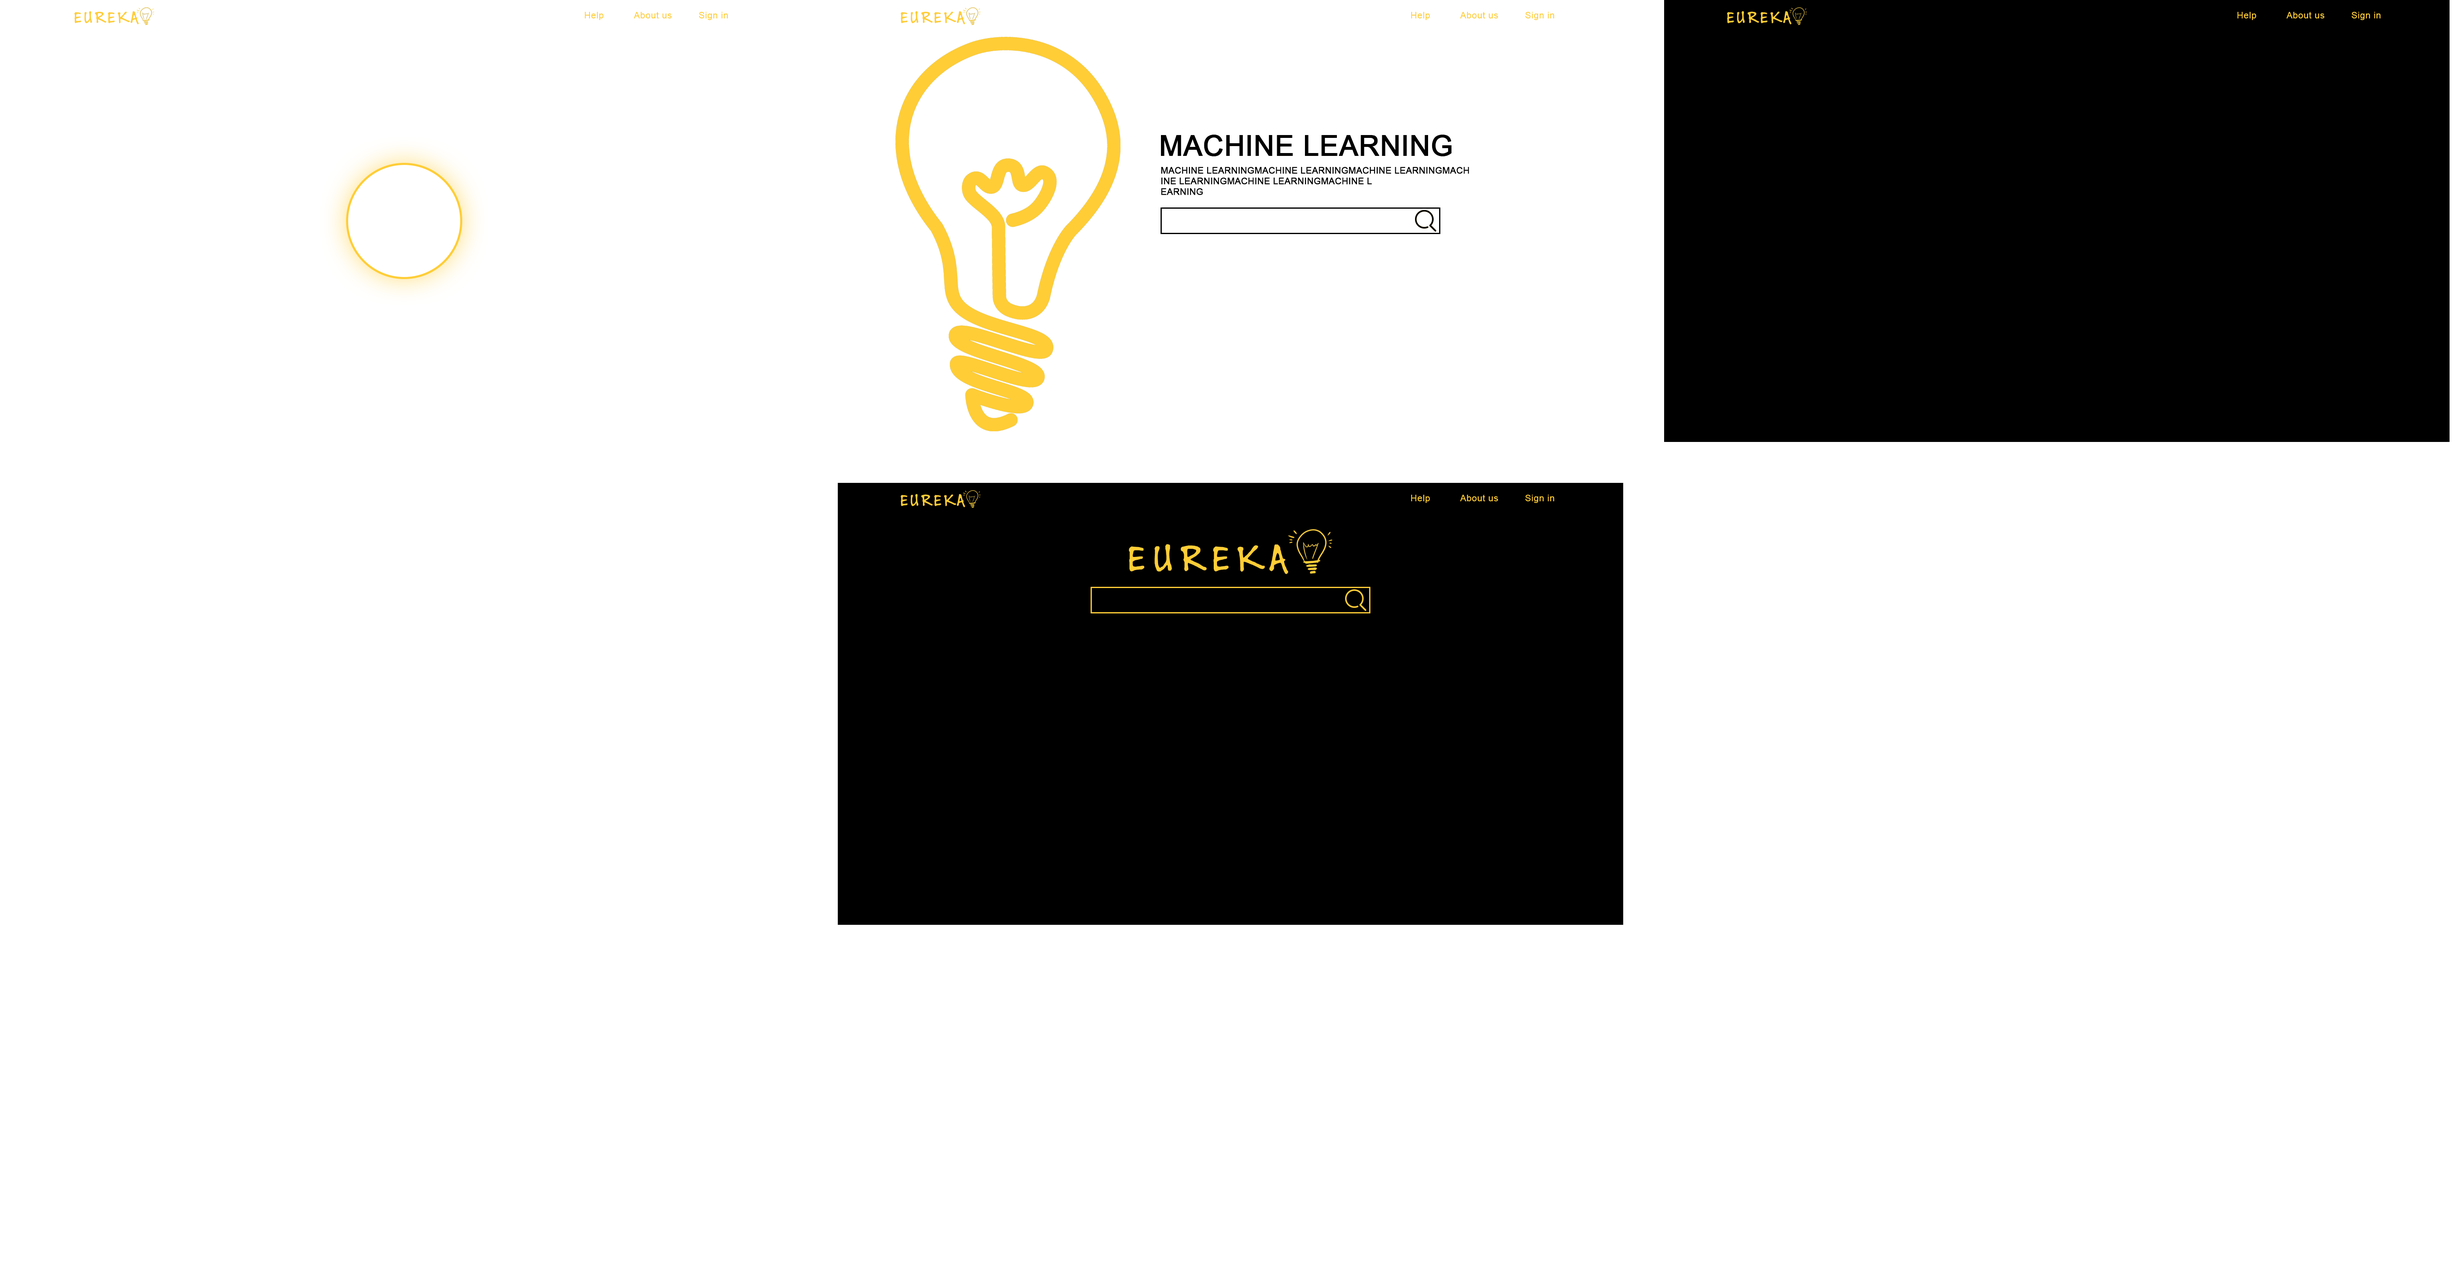
<style>
.page{position:relative;width:2461px;height:1280px;background:#ffffff}
.page>*{position:absolute;margin:0}
.t1{font:17.9px "BuxtonSketch";letter-spacing:0.14em;color:#ffcd36}
.t2{font:9px "ArialMT";letter-spacing:0.04em;color:#ffcd36}
.t3{font:28.2px "ArialMT";color:#000000;font-weight:bold}
.t4{font:9px "ArialMT";color:#000000;font-weight:bold}
</style>
<div class="page">
<p class="t1" style="left:74px;top:11px;width:65px;height:14px">EUREKA</p>
<p class="t2" style="left:585px;top:12px;width:19px;height:8px">Help</p>
<p class="t2" style="left:634px;top:12px;width:38px;height:6px">About us</p>
<p class="t2" style="left:699px;top:12px;width:29px;height:8px">Sign in</p>
<p class="t1" style="left:901px;top:11px;width:64px;height:14px">EUREKA</p>
<p class="t2" style="left:1411px;top:12px;width:19px;height:8px">Help</p>
<p class="t2" style="left:1460px;top:12px;width:38px;height:6px">About us</p>
<p class="t2" style="left:1525px;top:12px;width:30px;height:8px">Sign in</p>
<p class="t1" style="left:1727px;top:11px;width:65px;height:14px">EUREKA</p>
<p class="t2" style="left:2237px;top:12px;width:20px;height:8px">Help</p>
<p class="t2" style="left:2286px;top:12px;width:38px;height:6px">About us</p>
<p class="t2" style="left:2351px;top:12px;width:30px;height:8px">Sign in</p>
<p class="t3" style="left:1161px;top:135px;width:291px;height:21px">MACHINE LEARNING</p>
<p class="t4" style="left:1161px;top:167px;width:308px;height:28px">MACHINE LEARNINGMACHINE LEARNINGMACHINE LEARNINGMACH<br>INE LEARNINGMACHINE LEARNINGMACHINE L<br>EARNING</p>
<p class="t1" style="left:901px;top:494px;width:64px;height:13px">EUREKA</p>
<p class="t2" style="left:1411px;top:495px;width:19px;height:8px">Help</p>
<p class="t2" style="left:1460px;top:495px;width:38px;height:6px">About us</p>
<p class="t2" style="left:1525px;top:495px;width:30px;height:8px">Sign in</p>
</div>
